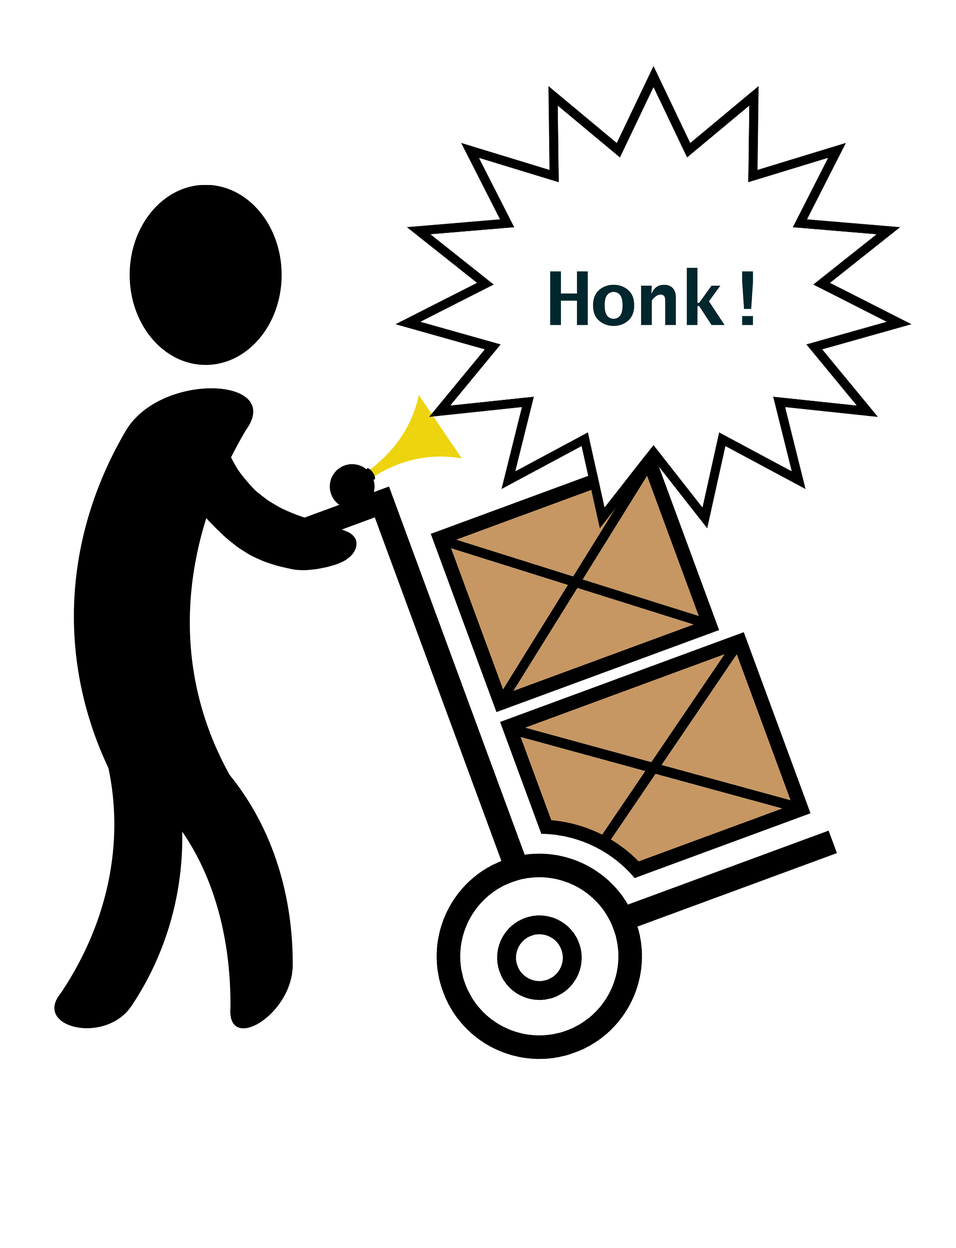
<style>
.page{position:relative;width:956px;height:1248px;background:#ffffff}
.page>*{position:absolute;margin:0}
.t1{font:74.1px "LucidaSans-TypewriterBold";color:#00272e}
</style>
<div class="page">
<p class="t1" style="left:550px;top:267px;width:203px;height:59px">Honk!</p>
</div>
